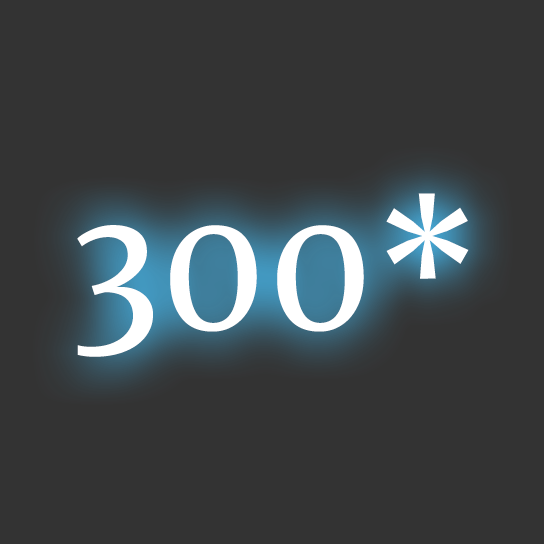
<style>
.page{position:relative;width:544px;height:544px;background:#333333}
.page>*{position:absolute;margin:0}
.t1{font:165.9px "Merriweather-Regular";color:#ffffff}
</style>
<div class="page">
<p class="t1" style="left:77px;top:193px;width:392px;height:164px">300*</p>
</div>
